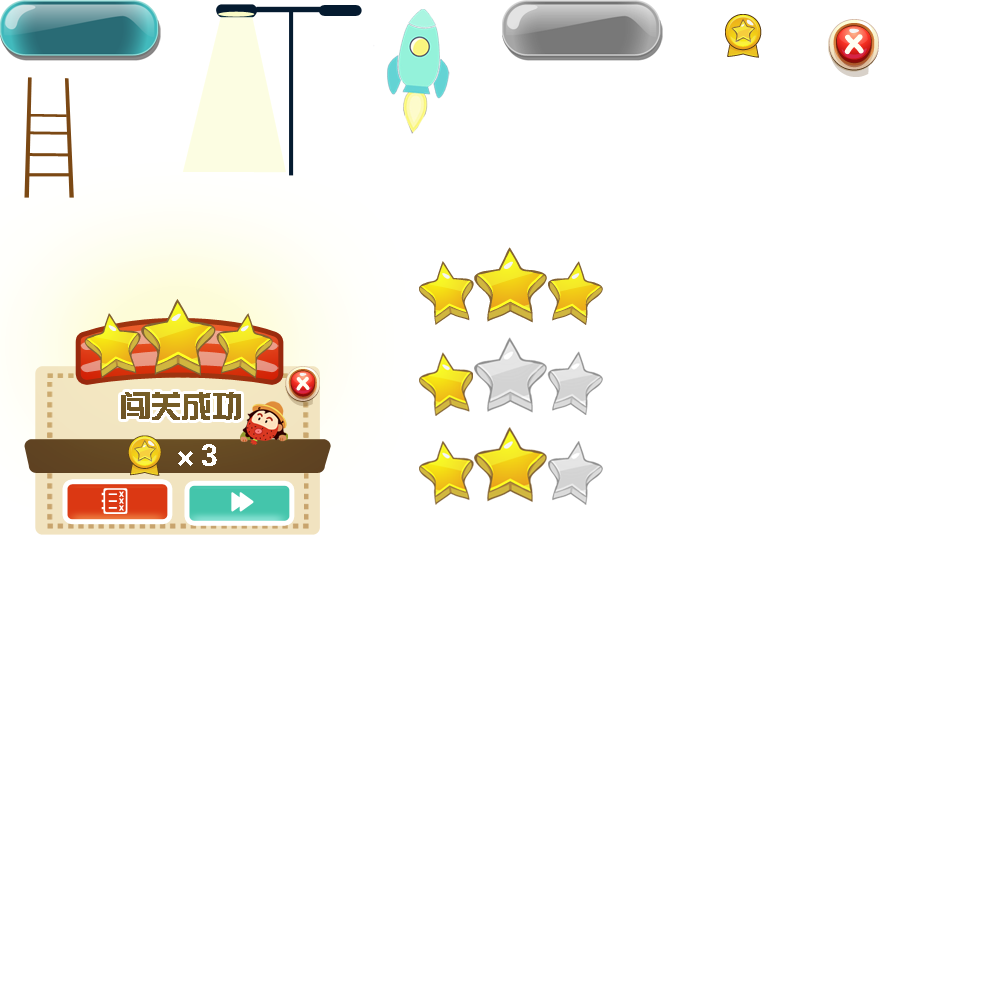
<style>
.page{position:relative;width:1000px;height:1000px;background:#ffffff}
.page>*{position:absolute;margin:0}
.t1{font:30.7px "FZZYJW--GB1-0";color:#735a26}
.t2{font:30.7px "FZZYJW--GB1-0";color:#ffffff}
</style>
<div class="page">
<p class="t1" style="left:121px;top:392px;width:120px;height:28px">闯关成功</p>
<p class="t2" style="left:178px;top:444px;width:39px;height:22px">×3</p>
</div>
